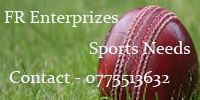
<style>
.page{position:relative;width:200px;height:100px}
.page>*{position:absolute;margin:0}
.t1{font:18px "Constantia";color:#eef2f7}
</style>
<div class="page">
<p class="t1" style="left:4px;top:11px;width:115px;height:16px">FR Enterprizes</p>
<p class="t1" style="left:89px;top:41px;width:102px;height:17px">Sports Needs</p>
<p class="t1" style="left:9px;top:71px;width:161px;height:16px">Contact - 0775513632</p>
</div>
